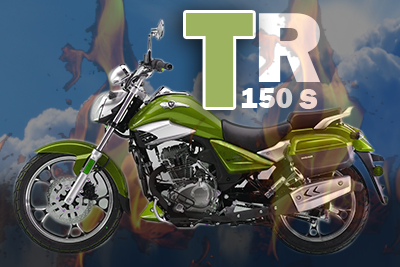
<style>
.page{position:relative;width:400px;height:267px}
.page>*{position:absolute;margin:0}
.t1{font:141.2px "FranklinGothic-Heavy";color:#9eb360}
.t2{font:103.5px "FranklinGothic-Heavy"}
.t3{font:30px "FranklinGothic-Heavy"}
.t4{font:30px "FranklinGothic-Heavy";color:#eed6cd}
</style>
<div class="page">
<p class="t1" style="left:186px;top:13px;width:67px;height:94px">T</p>
<p class="t2" style="left:258px;top:13px;width:63px;height:69px">R</p>
<p class="t3" style="left:241px;top:88px;width:52px;height:20px">150</p>
<p class="t4" style="left:299px;top:89px;width:19px;height:20px">S</p>
</div>
